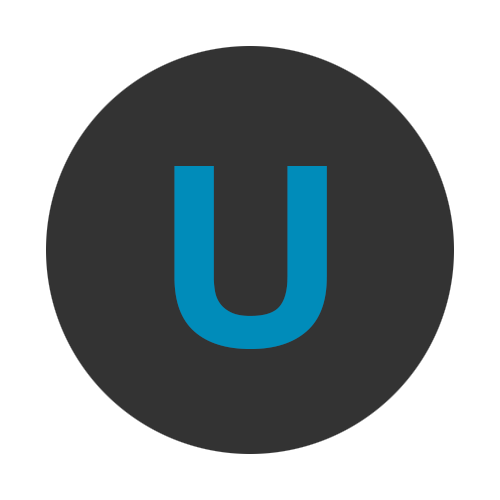
<style>
.page{position:relative;width:500px;height:500px;background:#ffffff}
.page>*{position:absolute;margin:0}
.t1{font:250px "HelveticaNeue-Bold";color:#008cba}
</style>
<div class="page">
<p class="t1" style="left:174px;top:166px;width:153px;height:183px">U</p>
</div>
